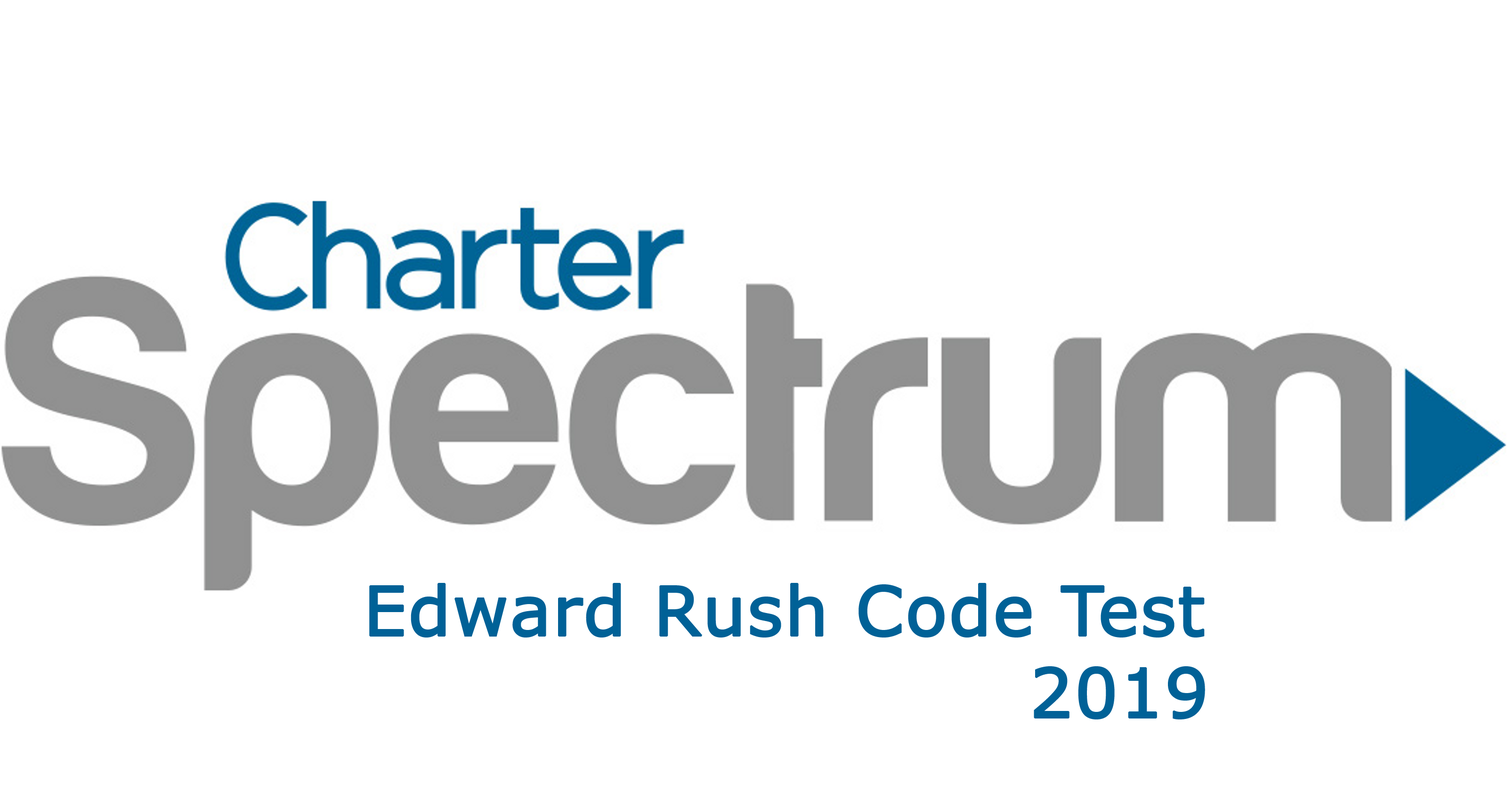
<style>
.page{position:relative;width:1507px;height:791px;background:#ffffff}
.page>*{position:absolute;margin:0}
.t1{font:68.3px "Verdana";color:#006197;font-weight:bold}
</style>
<div class="page">
<p class="t1" style="left:369px;top:583px;width:836px;height:55px">Edward Rush Code Test</p>
<p class="t1" style="left:1034px;top:666px;width:171px;height:54px">2019</p>
</div>
